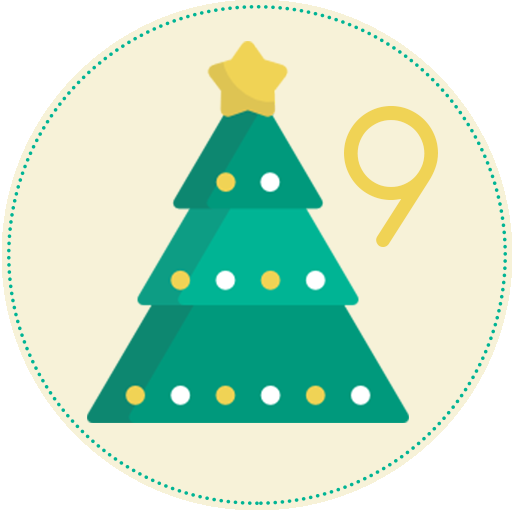
<style>
.page{position:relative;width:512px;height:512px;background:#f7f2d8}
.page>*{position:absolute;margin:0}
.t1{font:220.4px "Antipasto";color:#f0d355}
</style>
<div class="page">
<p class="t1" style="left:344px;top:106px;width:94px;height:141px">9</p>
</div>
